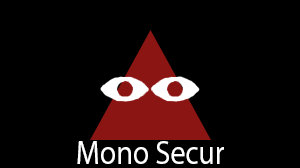
<style>
.page{position:relative;width:300px;height:168px;background:#000000}
.page>*{position:absolute;margin:0}
.t1{font:33.9px "MyriadPro-Regular";color:#ffffff;scale:0.88 1}
</style>
<div class="page">
<p class="t1" style="left:77px;top:141px;width:147px;height:23px">Mono Secur</p>
</div>
